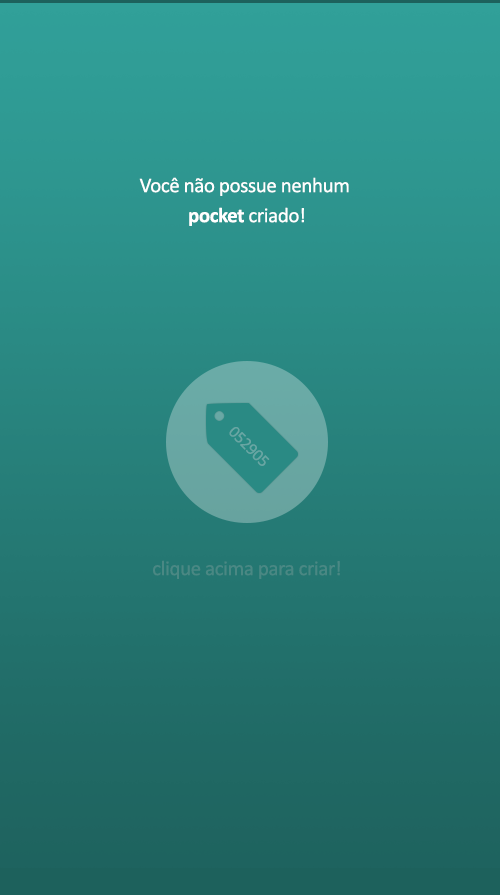
<style>
.page{position:relative;width:500px;height:895px}
.page>*{position:absolute;margin:0}
.t1{font:21px/30px "Calibri";letter-spacing:-0.02em;color:#ffffff}
.t2{font:21px/30px "Calibri-Bold";letter-spacing:-0.02em;color:#ffffff}
.t3{font:16.9px "Calibri";letter-spacing:-0.02em;color:#68a6a3}
.t4{font:21px "Calibri";letter-spacing:-0.02em;color:#4a8884}
</style>
<div class="page">
<p class="t1" style="left:139px;top:177px;width:210px;height:49px;text-align:center">Você não possue nenhum <br><span class="t2">pocket </span>criado!</p>
<p class="t3" style="left:229px;top:427px;width:41px;height:39px;rotate:45deg">052905</p>
<p class="t4" style="left:153px;top:560px;width:187px;height:19px">clique acima para criar!</p>
</div>
